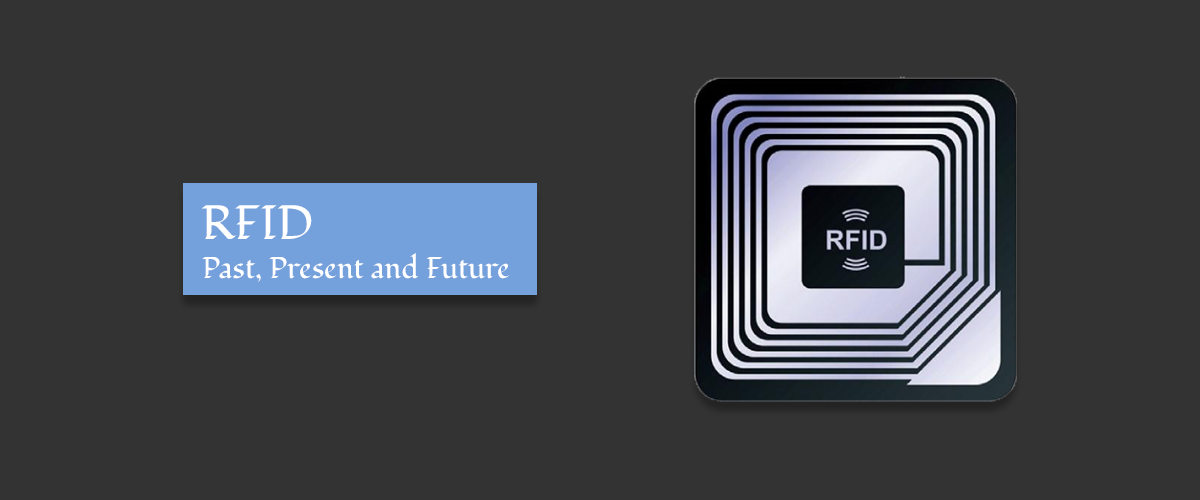
<style>
.page{position:relative;width:1200px;height:500px;background:#333333}
.page>*{position:absolute;margin:0}
.t1{font:48px "Fondamento-Regular";color:#ffffff}
.t2{font:30px "Fondamento-Regular";color:#ffffff}
</style>
<div class="page">
<p class="t1" style="left:201px;top:205px;width:111px;height:34px">RFID</p>
<p class="t2" style="left:202px;top:253px;width:308px;height:29px">Past, Present and Future</p>
</div>
